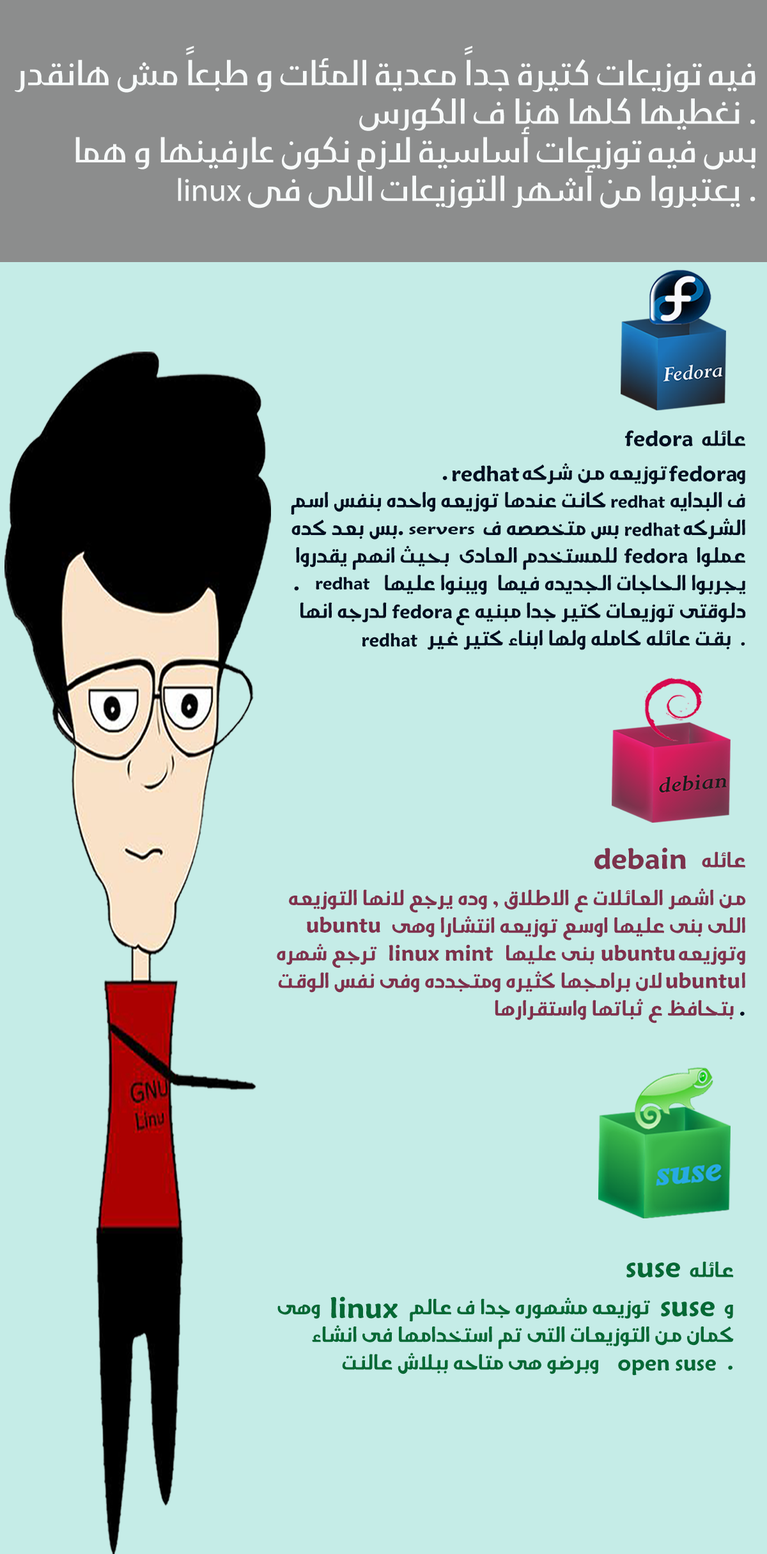
<style>
.page{position:relative;width:767px;height:1554px;background:#c5ece7}
.page>*{position:absolute;margin:0}
.t1{font:32.2px "BigVestaArabicBeta";color:#f7fafa}
.t2{font:32.2px "MyriadPro-Regular";color:#f7fafa}
.t3{font:23px "AraJozoor-Regular";color:#010f21}
.t4{font:19.2px "AraJozoor-Regular";color:#010f21}
.t5{font:18.5px "AraJozoor-Regular";color:#010f21}
.t6{font:16.2px "AraJozoor-Regular";color:#010f21;scale:1.3 1}
.t7{font:19.8px "AraJozoor-Regular";color:#010f21;scale:0.96 1}
.t8{font:21.5px "AraJozoor-Regular";color:#010f21}
.t9{font:20.3px "AraJozoor-Regular";color:#010f21}
.t10{font:23px "AraJozoor-Regular";color:#80314d}
.t11{font:30.7px "AraJozoor-Regular";color:#7c324c}
.t12{font:23px "AraJozoor-Regular";color:#7d324c}
.t13{font:23px "AraJozoor-Regular";color:#036935}
.t14{font:30.7px "AraJozoor-Regular";color:#036935}
</style>
<div class="page">
<p class="t1" style="left:15px;top:45px;width:741px;height:163px;text-align:right">فيه توزيعات كتيرة جداً معدية المئات و طبعاً مش هانقدر<br> نغطيها كلها هنا ف الكورس .<br>بس فيه توزيعات أساسية لازم نكون عارفينها و هما<br><span class="t2">linux</span> يعتبروا من أشهر التوزيعات اللى فى .</p>
<p class="t3" style="left:291px;top:430px;width:455px;height:220px;text-align:right">عائله<br>                            و              توزيعه من شركه               .  ف البدايه             كانت عندها توزيعه واحده بنفس اسم الشركه             بس متخصصه ف                .بس بعد كده عملوا                للمستخدم العادى  بحيث انهم يقدروا يجربوا الحاجات الجديده فيها  ويبنوا عليها                 . دلوقتى توزيعات كتير جدا مبنيه ع              لدرجه انها بقت عائله كامله ولها ابناء كتير غير <span class="t4"> .</span></p>
<p class="t3" style="left:625px;top:430px;width:68px;height:17px">fedora</p>
<p class="t3" style="left:452px;top:465px;width:68px;height:17px">redhat</p>
<p class="t3" style="left:669px;top:465px;width:68px;height:17px">fedora</p>
<p class="t5" style="left:611px;top:495px;width:55px;height:13px">redhat</p>
<p class="t6" style="left:409px;top:526px;width:65px;height:8px">servers</p>
<p class="t7" style="left:625px;top:522px;width:55px;height:14px">redhat</p>
<p class="t8" style="left:624px;top:548px;width:64px;height:16px">fedora</p>
<p class="t5" style="left:316px;top:577px;width:54px;height:13px">redhat</p>
<p class="t9" style="left:392px;top:604px;width:61px;height:15px">fedora</p>
<p class="t7" style="left:362px;top:633px;width:55px;height:14px">redhat</p>
<p class="t10" style="left:277px;top:852px;width:469px;height:172px;text-align:right">عائله<br>من اشهر العائلات ع الاطلاق , وده يرجع لانها التوزيعه اللى بنى عليها اوسع توزيعه انتشارا وهى             وتوزيعه                 بنى عليها                          ترجع شهره ا                لان برامجها كثيره ومتجدده وفى نفس الوقت بتحافظ ع ثباتها واستقرارها<span class="t3"> .</span></p>
<p class="t11" style="left:595px;top:848px;width:92px;height:22px">debain</p>
<p class="t10" style="left:307px;top:917px;width:73px;height:16px">ubuntu</p>
<p class="t12" style="left:389px;top:945px;width:105px;height:17px">linux mint</p>
<p class="t10" style="left:602px;top:945px;width:73px;height:17px">ubuntu</p>
<p class="t10" style="left:666px;top:972px;width:74px;height:17px">ubuntu</p>
<p class="t13" style="left:277px;top:1261px;width:457px;height:114px;text-align:right">عائله<br>و               توزيعه مشهوره جدا ف عالم                  وهى كمان من التوزيعات التى تم استخدامها فى انشاء                                      وبرضو هى متاحه ببلاش عالنت                          .</p>
<p class="t14" style="left:627px;top:1263px;width:53px;height:15px">suse</p>
<p class="t14" style="left:331px;top:1297px;width:67px;height:22px">linux</p>
<p class="t14" style="left:661px;top:1302px;width:54px;height:15px">suse</p>
<p class="t13" style="left:618px;top:1359px;width:98px;height:17px">open suse</p>
</div>
